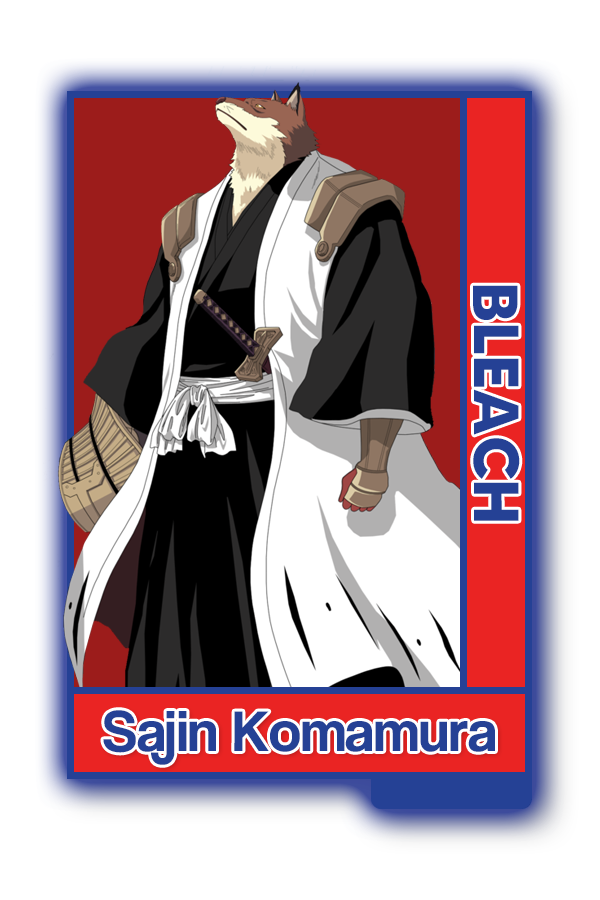
<style>
.page{position:relative;width:600px;height:900px;background:#ffffff}
.page>*{position:absolute;margin:0}
.t1{font:63.6px "MADETOMMY-Bold";color:#254195}
.t2{font:59.4px "CoolveticaRg-Regular";color:#254195}
</style>
<div class="page">
<p class="t1" style="left:473px;top:285px;width:47px;height:236px;rotate:90deg">BLEACH</p>
<p class="t2" style="left:103px;top:710px;width:392px;height:55px">Sajin Komamura</p>
</div>
